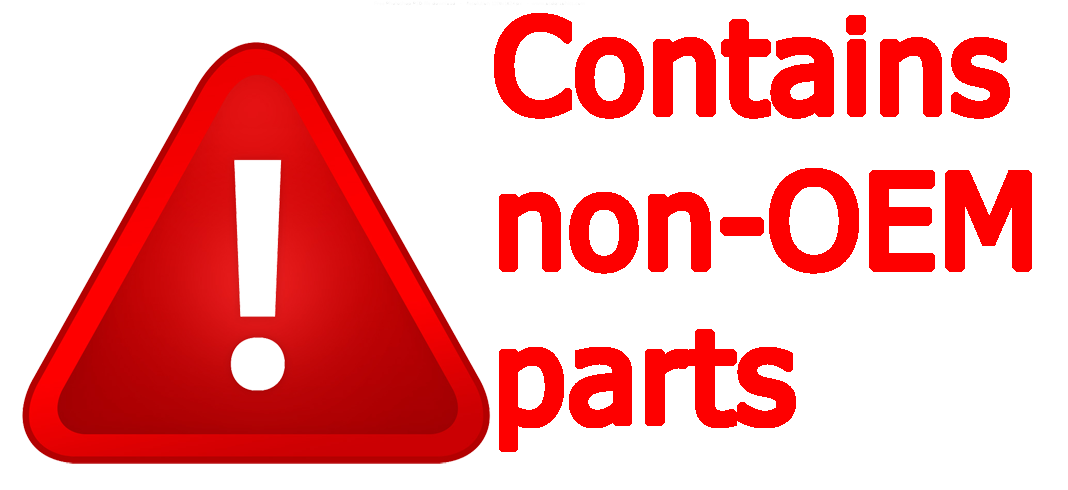
<style>
.page{position:relative;width:1068px;height:490px;background:#ffffff}
.page>*{position:absolute;margin:0}
.t1{font:129.1px "Tahoma";color:#fe0000;font-weight:bold}
</style>
<div class="page">
<p class="t1" style="left:494px;top:13px;width:538px;height:439px">Contains <br>non-OEM<br>parts</p>
</div>
